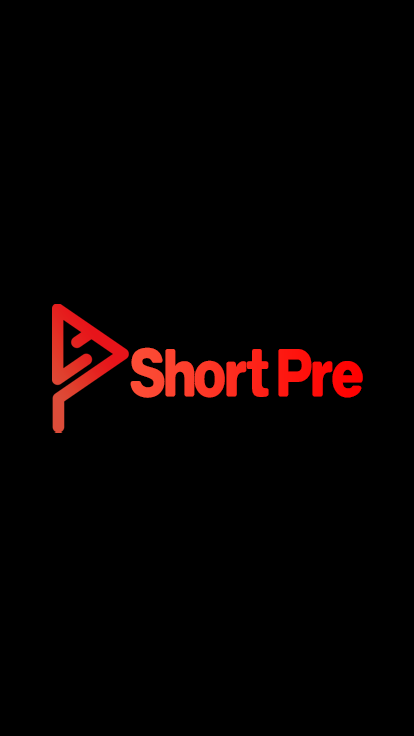
<style>
.page{position:relative;width:414px;height:736px;background:#000000}
.page>*{position:absolute;margin:0}
.t1{font:56.2px "KoreanDGH-R";letter-spacing:-0.06em;scale:0.87 1}
</style>
<div class="page">
<p class="t1" style="left:130px;top:347px;width:233px;height:51px">Short Pre</p>
</div>
